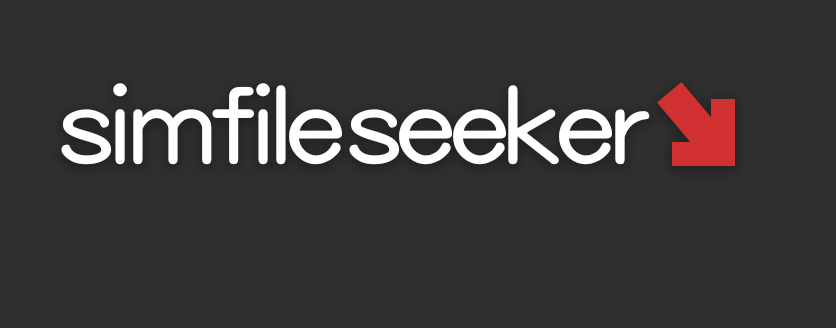
<style>
.page{position:relative;width:836px;height:328px;background:#2f2f2f}
.page>*{position:absolute;margin:0}
.t1{font:105.3px "DFMaruGothic-Bd-WING-RKSJ-H";letter-spacing:-0.02em;color:#ffffff;scale:1.05 1}
</style>
<div class="page">
<p class="t1" style="left:61px;top:83px;width:281px;height:82px">simfile</p>
<p class="t1" style="left:349px;top:85px;width:301px;height:80px">seeker</p>
</div>
